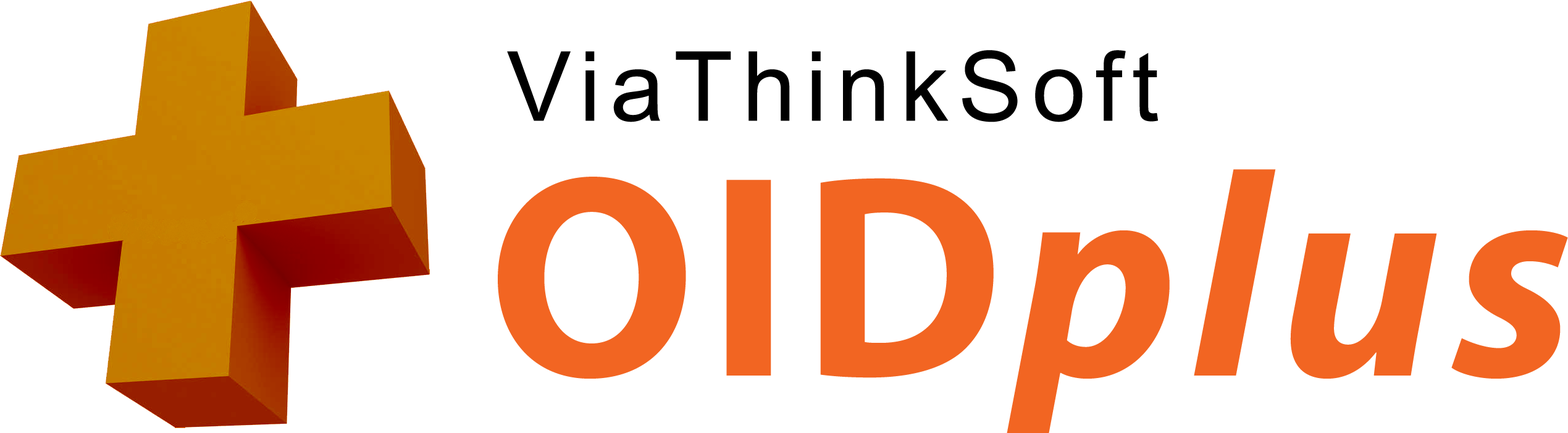
<style>
.page{position:relative;width:1568px;height:433px;background:#ffffff}
.page>*{position:absolute;margin:0}
.t1{font:96.5px "ArialMT";letter-spacing:0.1em;color:#000000}
.t2{font:290px "Myriad-BoldItalic";letter-spacing:0.04em;color:#f26522}
.t3{font:290px "Myriad-Bold";letter-spacing:0.04em;color:#f26522}
</style>
<div class="page">
<p class="t1" style="left:507px;top:50px;width:651px;height:72px">ViaThinkSoft</p>
<p class="t2" style="left:498px;top:169px;width:1070px;height:264px"><span class="t3">OID</span>plus</p>
</div>
